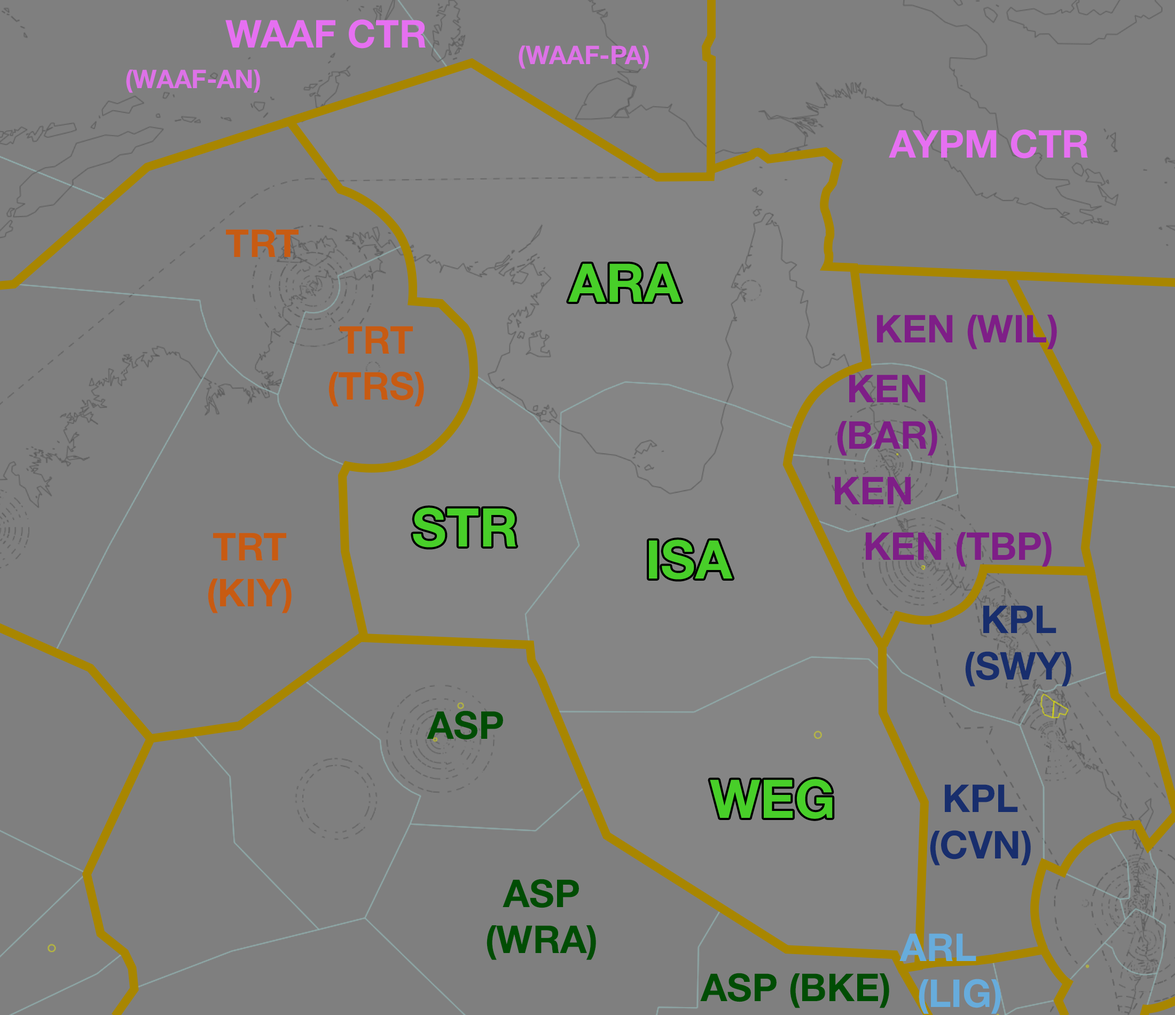
<style>
.page{position:relative;width:1175px;height:1015px;background:#7f7f7f}
.page>*{position:absolute;margin:0}
.t1{font:38.5px "HelveticaNeue-Bold";color:#e670f1}
.t2{font:25.6px "HelveticaNeue-Bold";color:#e670f1}
.t3{font:38.5px "HelveticaNeue-Bold";color:#c75b12}
.t4{font:53.4px "HelveticaNeue-Bold";color:#48cf29}
.t5{font:38.5px "HelveticaNeue-Bold";color:#7e1e87}
.t6{font:38.5px "HelveticaNeue-Bold";color:#182e6d}
.t7{font:38.5px "HelveticaNeue-Bold";color:#004d04}
.t8{font:38.5px "HelveticaNeue-Bold";color:#67acdc}
</style>
<div class="page">
<p class="t1" style="left:225px;top:19px;width:201px;height:30px">WAAF CTR</p>
<p class="t2" style="left:519px;top:45px;width:130px;height:24px">(WAAF-PA)</p>
<p class="t2" style="left:126px;top:69px;width:134px;height:24px">(WAAF-AN)</p>
<p class="t1" style="left:889px;top:129px;width:199px;height:30px">AYPM CTR</p>
<p class="t3" style="left:226px;top:229px;width:73px;height:28px">TRT</p>
<p class="t4" style="left:568px;top:263px;width:114px;height:39px">ARA</p>
<p class="t5" style="left:877px;top:314px;width:180px;height:35px">KEN (WIL)</p>
<p class="t3" style="left:328px;top:326px;width:96px;height:80px;text-align:center">TRT<br>(TRS)</p>
<p class="t5" style="left:837px;top:374px;width:100px;height:82px;text-align:center">KEN<br>(BAR)</p>
<p class="t5" style="left:835px;top:476px;width:76px;height:28px">KEN</p>
<p class="t4" style="left:413px;top:507px;width:103px;height:40px">STR</p>
<p class="t3" style="left:208px;top:533px;width:84px;height:80px;text-align:center">TRT<br>(KIY)</p>
<p class="t5" style="left:866px;top:532px;width:186px;height:35px">KEN (TBP)</p>
<p class="t4" style="left:649px;top:539px;width:84px;height:41px">ISA</p>
<p class="t6" style="left:965px;top:605px;width:106px;height:81px;text-align:center">KPL<br>(SWY)</p>
<p class="t7" style="left:427px;top:710px;width:76px;height:30px">ASP</p>
<p class="t4" style="left:710px;top:779px;width:123px;height:40px">WEG</p>
<p class="t6" style="left:930px;top:784px;width:101px;height:81px;text-align:center">KPL<br>(CVN)</p>
<p class="t7" style="left:487px;top:879px;width:109px;height:81px;text-align:center">ASP<br>(WRA)</p>
<p class="t8" style="left:899px;top:933px;width:102px;height:81px;text-align:center">ARL<br>    (LIG)</p>
<p class="t7" style="left:700px;top:973px;width:189px;height:35px">ASP (BKE)</p>
</div>
